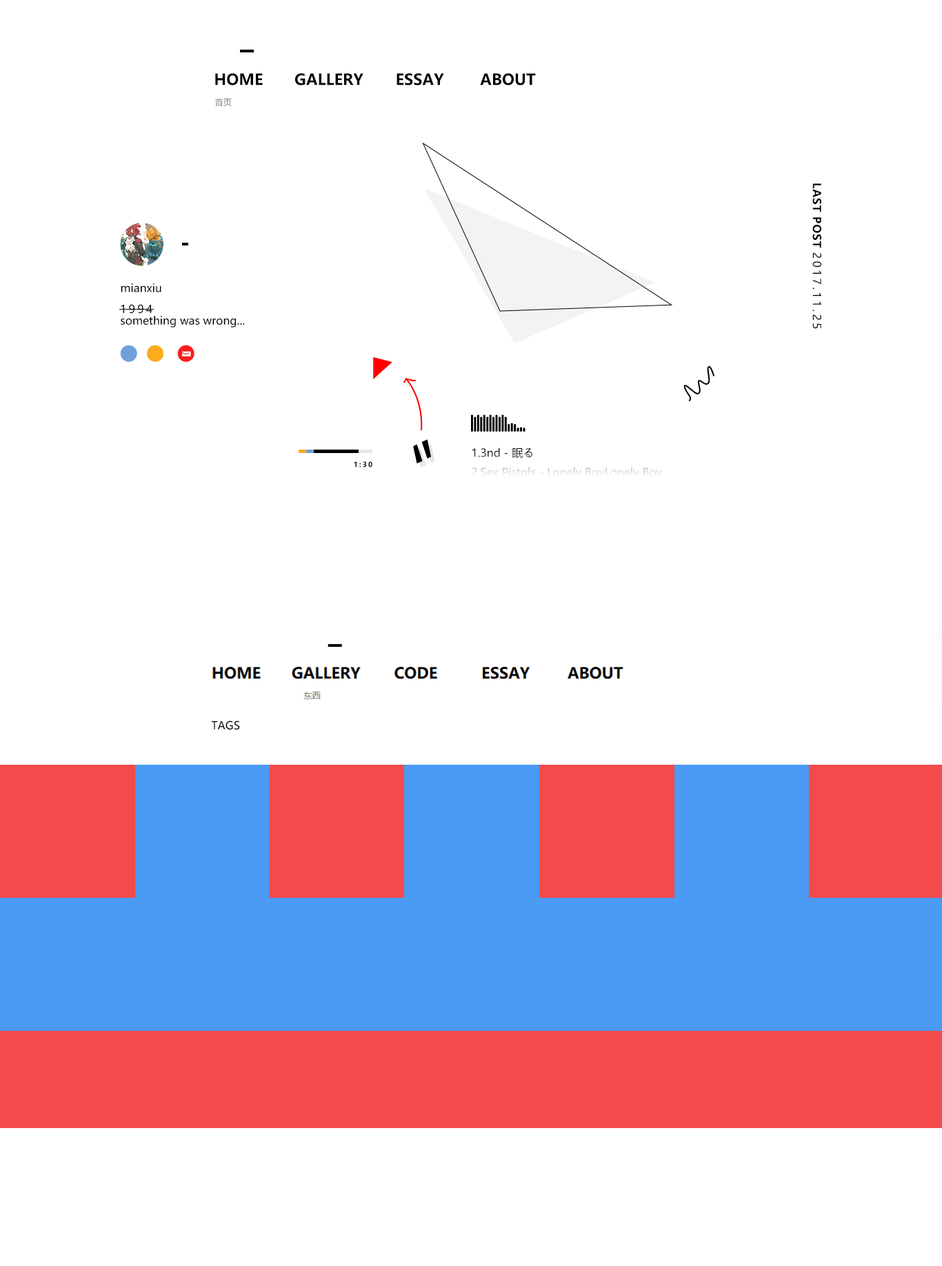
<style>
.page{position:relative;width:942px;height:1266px;background:#ffffff}
.page>*{position:absolute;margin:0}
.t1{font:15.2px "MicrosoftYaHei-Bold";color:#000000}
.t2{font:8.3px "MicrosoftYaHei";color:#7f7f7f}
.t3{font:11px/44.2px "MicrosoftYaHei";letter-spacing:0.2em;color:#000000}
.t4{font:11px/44.2px "MicrosoftYaHei-Bold";letter-spacing:0.05em;color:#000000}
.t5{font:11px "MicrosoftYaHei";color:#000000}
.t6{font:11px "MicrosoftYaHei";letter-spacing:0.2em;color:#000000}
.t7{font:11px "MicrosoftYaHei"}
.t8{font:6.9px "MicrosoftYaHei-Bold";letter-spacing:0.2em;color:#000000}
</style>
<div class="page">
<p class="t1" style="left:215px;top:73px;width:48px;height:13px">HOME</p>
<p class="t1" style="left:295px;top:73px;width:68px;height:13px">GALLERY</p>
<p class="t1" style="left:396px;top:73px;width:48px;height:13px">ESSAY</p>
<p class="t1" style="left:480px;top:73px;width:56px;height:13px">ABOUT</p>
<p class="t2" style="left:214px;top:98px;width:18px;height:9px">首页</p>
<p class="t3" style="left:812px;top:183px;width:9px;height:146px"><span class="t4">LAST POST </span>2017.11.25</p>
<p class="t5" style="left:121px;top:283px;width:40px;height:9px">mianxiu</p>
<p class="t6" style="left:121px;top:304px;width:31px;height:10px">1994</p>
<p class="t5" style="left:121px;top:316px;width:124px;height:12px">something was wrong...</p>
<p class="t7" style="left:472px;top:448px;width:191px;height:31px">1.3nd - 眠る<br>2.Sex Pistols - Lonely BoyLonely Boy</p>
<p class="t8" style="left:354px;top:461px;width:18px;height:7px">1:30</p>
<p class="t5" style="left:211px;top:721px;width:29px;height:9px">TAGS</p>
</div>
